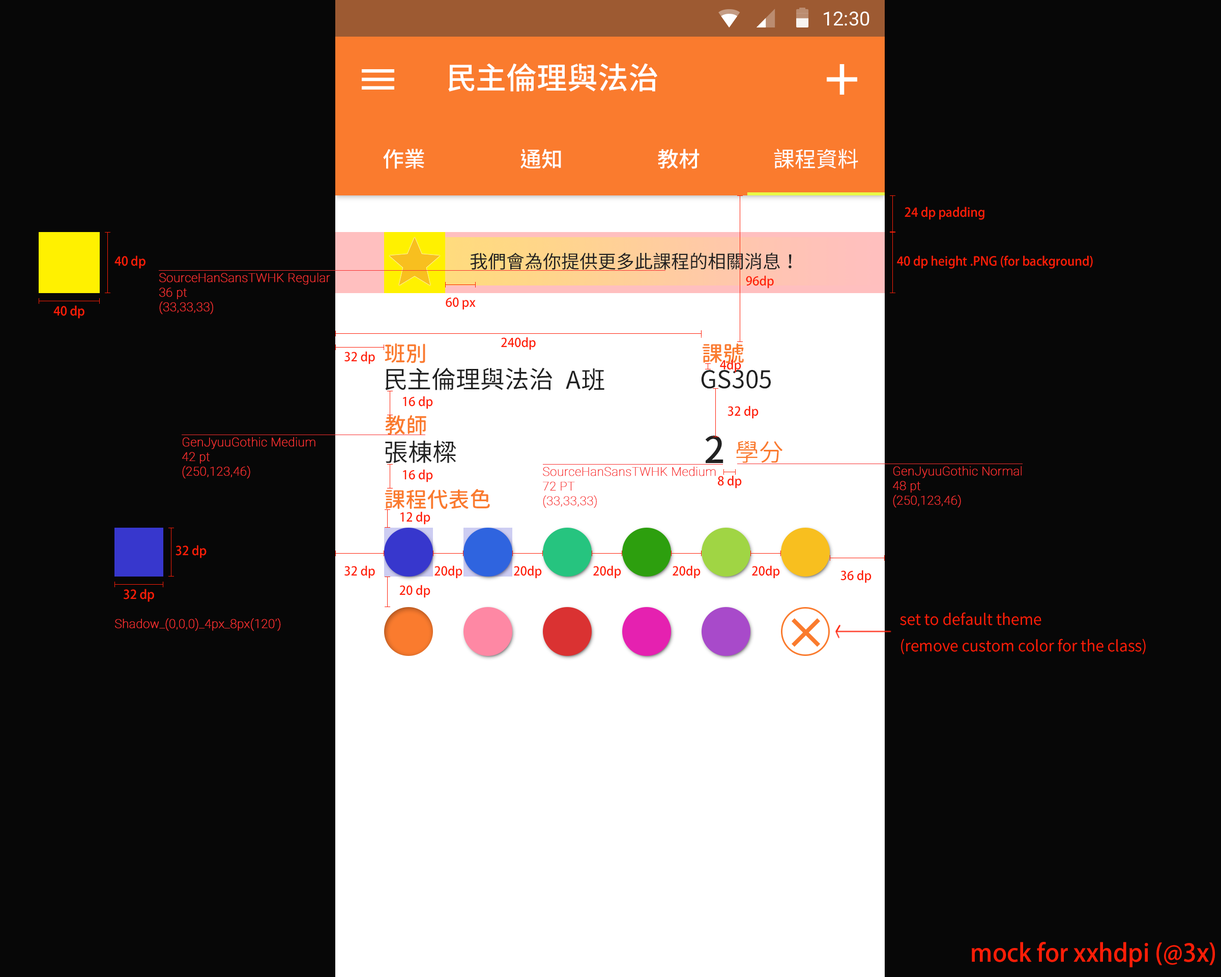
<style>
.page{position:relative;width:1221px;height:977px;background:#070707}
.page>*{position:absolute;margin:0}
.t1{font:19.4px "Roboto-Regular";color:#ffffff}
.t2{font:30.5px "SourceHanSansTWHK-Medium";color:#ffffff}
.t3{font:21.4px "SourceHanSansTWHK-Medium";color:#ffffff}
.t4{font:21.4px "SourceHanSansTWHK-Regular";color:#ffffff}
.t5{font:12.2px "AdobeFanHeitiStd-Bold";color:#ff1e07}
.t6{font:18.3px "SourceHanSansTWHK-Regular";color:#212121}
.t7{font:12.2px "Roboto-Thin";color:#f83030;font-weight:bold}
.t8{font:21.4px "GenJyuuGothic-Medium";color:#fa7b2e}
.t9{font:24.4px "SourceHanSansTWHK-Regular";color:#212121}
.t10{font:36.6px "SourceHanSansTWHK-Medium";color:#212121}
.t11{font:24.4px "GenJyuuGothic-Normal";color:#fa7b2e}
.t12{font:15.3px "SourceHanSansTWHK-Normal";color:#ff1e07}
.t13{font:24.4px "AdobeFanHeitiStd-Bold";color:#ff1e07}
</style>
<div class="page">
<p class="t1" style="left:824px;top:11px;width:45px;height:15px">12:30</p>
<p class="t2" style="left:448px;top:63px;width:209px;height:29px">民主倫理與法治</p>
<p class="t3" style="left:383px;top:149px;width:41px;height:20px">作業</p>
<p class="t3" style="left:520px;top:149px;width:41px;height:20px">通知</p>
<p class="t3" style="left:658px;top:149px;width:41px;height:20px">教材</p>
<p class="t4" style="left:774px;top:149px;width:84px;height:20px">課程資料</p>
<p class="t5" style="left:904px;top:207px;width:80px;height:13px">24 dp padding</p>
<p class="t5" style="left:114px;top:255px;width:31px;height:14px">40 dp</p>
<p class="t6" style="left:470px;top:252px;width:322px;height:18px">我們會為你提供更多此課程的相關消息！</p>
<p class="t5" style="left:897px;top:255px;width:196px;height:14px">40 dp height .PNG (for background)</p>
<p class="t7" style="left:159px;top:273px;width:171px;height:41px">SourceHanSansTWHK Regular<br>36 pt<br>(33,33,33)</p>
<p class="t5" style="left:746px;top:275px;width:28px;height:13px">96dp</p>
<p class="t5" style="left:53px;top:305px;width:31px;height:13px">40 dp</p>
<p class="t5" style="left:446px;top:297px;width:30px;height:13px">60 px</p>
<p class="t5" style="left:501px;top:337px;width:35px;height:13px">240dp</p>
<p class="t5" style="left:344px;top:351px;width:31px;height:13px">32 dp</p>
<p class="t8" style="left:385px;top:343px;width:40px;height:20px">班別</p>
<p class="t8" style="left:702px;top:343px;width:42px;height:20px">課號</p>
<p class="t5" style="left:720px;top:359px;width:21px;height:13px">4dp</p>
<p class="t9" style="left:385px;top:367px;width:167px;height:23px">民主倫理與法治</p>
<p class="t9" style="left:566px;top:368px;width:38px;height:23px">A班</p>
<p class="t9" style="left:701px;top:370px;width:70px;height:19px">GS305</p>
<p class="t5" style="left:403px;top:396px;width:30px;height:13px">16 dp</p>
<p class="t5" style="left:727px;top:405px;width:31px;height:14px">32 dp</p>
<p class="t8" style="left:385px;top:415px;width:41px;height:20px">教師</p>
<p class="t7" style="left:182px;top:437px;width:133px;height:42px">GenJyuuGothic Medium<br>42 pt<br>(250,123,46)</p>
<p class="t10" style="left:705px;top:435px;width:18px;height:28px">2</p>
<p class="t9" style="left:385px;top:440px;width:71px;height:23px">張棟樑</p>
<p class="t11" style="left:736px;top:441px;width:46px;height:22px">學分</p>
<p class="t5" style="left:403px;top:469px;width:30px;height:13px">16 dp</p>
<p class="t7" style="left:543px;top:466px;width:173px;height:42px">SourceHanSansTWHK Medium<br>72 PT<br>(33,33,33)</p>
<p class="t7" style="left:893px;top:466px;width:128px;height:42px">GenJyuuGothic Normal<br>48 pt<br>(250,123,46)</p>
<p class="t5" style="left:718px;top:475px;width:24px;height:13px">8 dp</p>
<p class="t8" style="left:385px;top:489px;width:105px;height:20px">課程代表色</p>
<p class="t5" style="left:400px;top:511px;width:30px;height:13px">12 dp</p>
<p class="t5" style="left:176px;top:545px;width:31px;height:13px">32 dp</p>
<p class="t5" style="left:344px;top:565px;width:31px;height:13px">32 dp</p>
<p class="t5" style="left:434px;top:565px;width:28px;height:13px">20dp</p>
<p class="t5" style="left:514px;top:565px;width:28px;height:13px">20dp</p>
<p class="t5" style="left:593px;top:565px;width:28px;height:13px">20dp</p>
<p class="t5" style="left:672px;top:565px;width:28px;height:13px">20dp</p>
<p class="t5" style="left:752px;top:565px;width:28px;height:13px">20dp</p>
<p class="t5" style="left:840px;top:570px;width:31px;height:13px">36 dp</p>
<p class="t5" style="left:124px;top:589px;width:30px;height:13px">32 dp</p>
<p class="t5" style="left:399px;top:584px;width:31px;height:14px">20 dp</p>
<p class="t12" style="left:900px;top:612px;width:246px;height:42px">set to default theme<br>(remove custom color for the class)</p>
<p class="t7" style="left:115px;top:618px;width:166px;height:13px">Shadow_(0,0,0)_4px_8px(120’)</p>
<p class="t13" style="left:972px;top:942px;width:243px;height:25px">mock for xxhdpi (@3x)</p>
</div>
